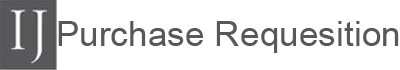
<style>
.page{position:relative;width:400px;height:70px;background:#ffffff}
.page>*{position:absolute;margin:0}
.t1{font:35px "ArialMT";color:#58585a}
</style>
<div class="page">
<p class="t1" style="left:58px;top:21px;width:341px;height:32px">Purchase Requesition</p>
</div>
